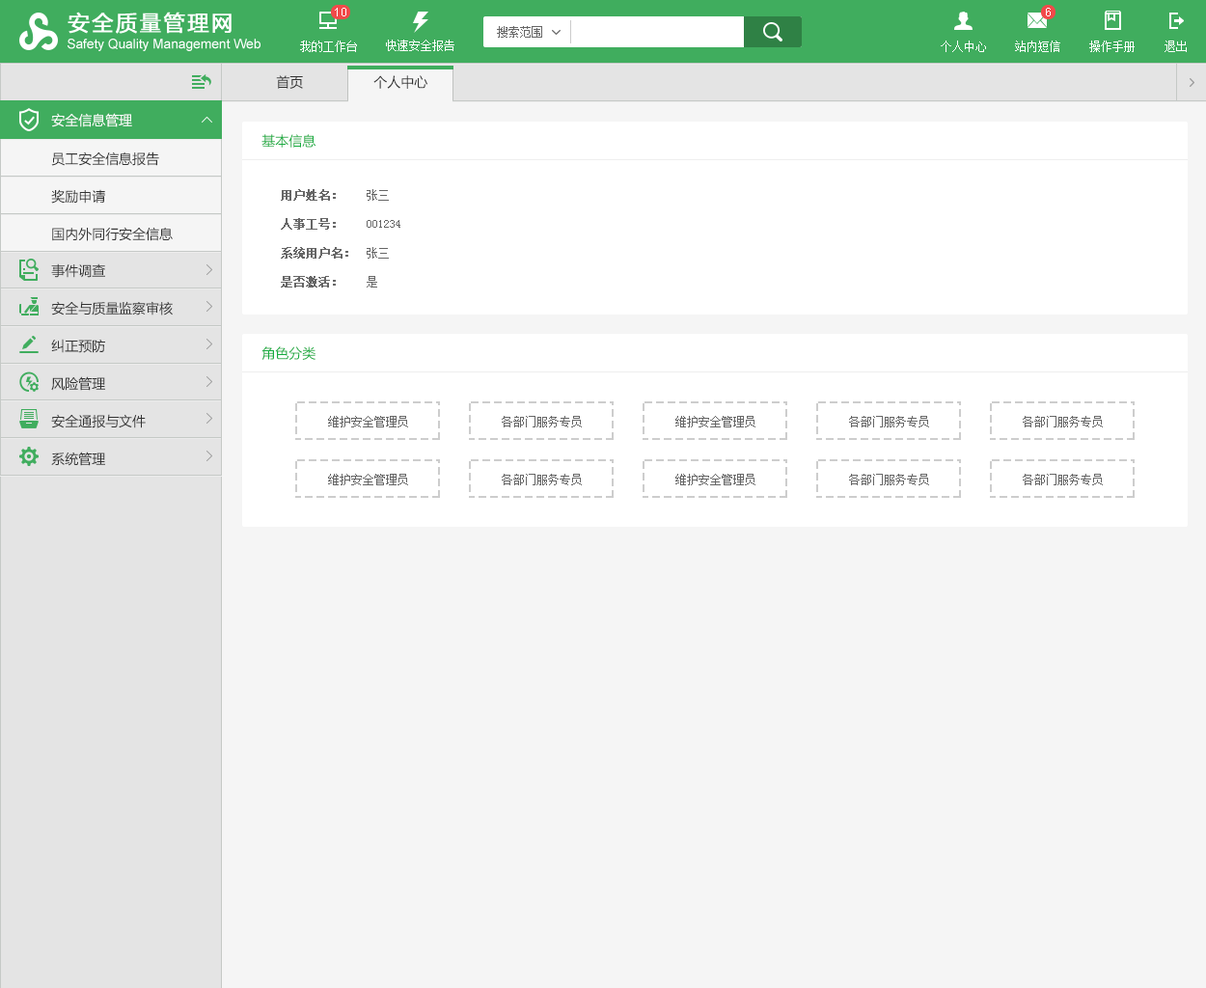
<style>
.page{position:relative;width:1206px;height:988px;background:#f5f5f5}
.page>*{position:absolute;margin:0}
.t1{font:13.5px "MicrosoftYaHei";color:#333333}
.t2{font:13.5px "MicrosoftYaHei";color:#ffffff}
.t3{font:13.5px "MicrosoftYaHei";color:#16ac3f}
.t4{font:13.5px/37.6px "MicrosoftYaHei";color:#333333}
.t5{font:11.6px/29px "SimSun";color:#666666;font-weight:bold}
.t6{font:11.6px/29px "SimSun";color:#666666}
.t7{font:11.6px "SimSun";color:#666666}
</style>
<div class="page">
<p class="t1" style="left:276px;top:75px;width:27px;height:14px">首页</p>
<p class="t1" style="left:374px;top:75px;width:54px;height:14px">个人中心</p>
<p class="t2" style="left:51px;top:113px;width:81px;height:14px">安全信息管理</p>
<p class="t3" style="left:262px;top:134px;width:55px;height:14px">基本信息</p>
<p class="t4" style="left:51px;top:152px;width:122px;height:89px">员工安全信息报告<br>奖励申请<br>国内外同行安全信息</p>
<p class="t5" style="left:281px;top:189px;width:67px;height:99px">用户姓名：<br>人事工号：<br>系统用户名：<br>是否激活：</p>
<p class="t6" style="left:367px;top:189px;width:34px;height:99px">张三<br>001234<br>张三<br>是</p>
<p class="t4" style="left:51px;top:263px;width:122px;height:203px">事件调查<br>安全与质量监察审核<br>纠正预防<br>风险管理<br>安全通报与文件<br>系统管理</p>
<p class="t3" style="left:262px;top:347px;width:54px;height:13px">角色分类</p>
<p class="t7" style="left:328px;top:416px;width:80px;height:12px">维护安全管理员</p>
<p class="t7" style="left:502px;top:416px;width:80px;height:12px">各部门服务专员</p>
<p class="t7" style="left:676px;top:416px;width:80px;height:12px">维护安全管理员</p>
<p class="t7" style="left:849px;top:416px;width:80px;height:12px">各部门服务专员</p>
<p class="t7" style="left:1023px;top:416px;width:80px;height:12px">各部门服务专员</p>
<p class="t7" style="left:328px;top:474px;width:80px;height:11px">维护安全管理员</p>
<p class="t7" style="left:502px;top:474px;width:80px;height:11px">各部门服务专员</p>
<p class="t7" style="left:676px;top:474px;width:80px;height:11px">维护安全管理员</p>
<p class="t7" style="left:849px;top:474px;width:80px;height:11px">各部门服务专员</p>
<p class="t7" style="left:1023px;top:474px;width:80px;height:11px">各部门服务专员</p>
</div>
